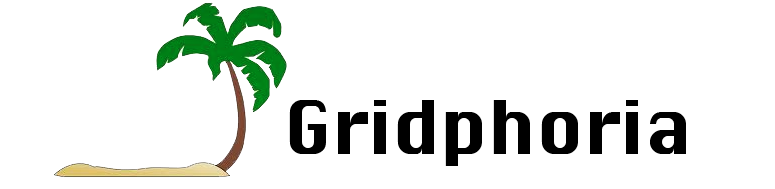
<style>
.page{position:relative;width:775px;height:189px;background:#ffffff}
.page>*{position:absolute;margin:0}
.t1{font:72px "Silom";color:#000000}
</style>
<div class="page">
<p class="t1" style="left:289px;top:100px;width:397px;height:66px">Gridphoria</p>
</div>
